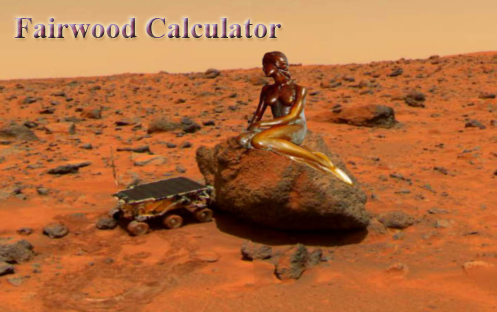
<style>
.page{position:relative;width:497px;height:312px}
.page>*{position:absolute;margin:0}
.t1{font:30px "TimesNewRomanPS-BoldMT"}
</style>
<div class="page">
<p class="t1" style="left:14px;top:18px;width:267px;height:20px">Fairwood Calculator</p>
</div>
